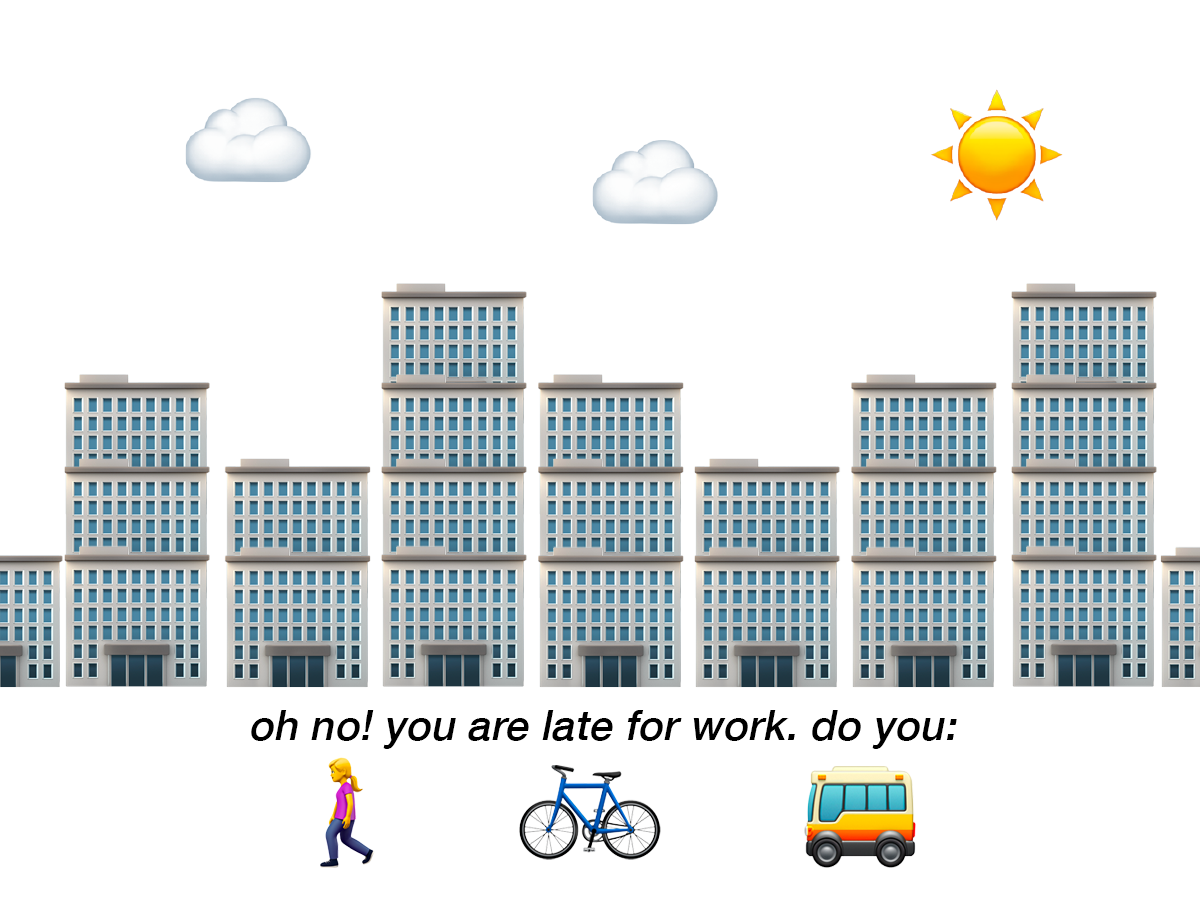
<style>
.page{position:relative;width:1200px;height:900px;background:#ffffff}
.page>*{position:absolute;margin:0}
.t1{font:41.7px "HelveticaNeue-Medium";letter-spacing:0.01em;color:#000000;font-style:italic}
</style>
<div class="page">
<p class="t1" style="left:251px;top:710px;width:706px;height:39px">oh no! you are late for work. do you:</p>
</div>
